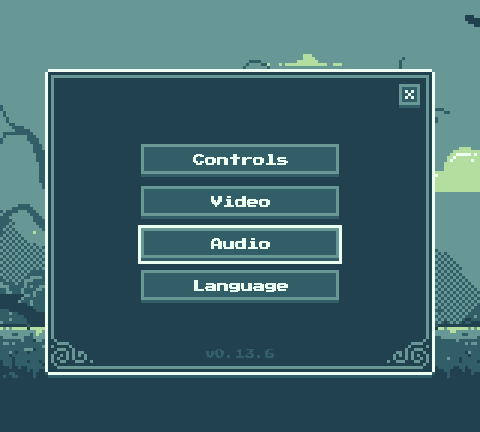
<style>
.page{position:relative;width:480px;height:432px;background:#21414e}
.page>*{position:absolute;margin:0}
.t1{font:12px "PressStart2P";color:#edfff0}
.t2{font:10px "PressStart2P";color:#325f67}
</style>
<div class="page">
<p class="t1" style="left:193px;top:154px;width:95px;height:11px">Controls</p>
<p class="t1" style="left:211px;top:196px;width:59px;height:11px">Video</p>
<p class="t1" style="left:211px;top:238px;width:59px;height:11px">Audio</p>
<p class="t1" style="left:194px;top:280px;width:94px;height:12px">Language</p>
<p class="t2" style="left:206px;top:349px;width:68px;height:9px">v0.13.6</p>
</div>
